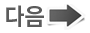
<style>
.page{position:relative;width:90px;height:33px;background:#ffffff}
.page>*{position:absolute;margin:0}
.t1{font:23.1px "NotoSansMonoCJKkr-Bold";color:#5b5b5b;scale:0.94 1}
</style>
<div class="page">
<p class="t1" style="left:6px;top:5px;width:38px;height:22px">다음</p>
</div>
